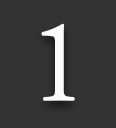
<style>
.page{position:relative;width:116px;height:128px;background:#333333}
.page>*{position:absolute;margin:0}
.t1{font:102px "KoPubWorldBatangMedium";color:#fafafa}
</style>
<div class="page">
<p class="t1" style="left:41px;top:23px;width:34px;height:78px">1</p>
</div>
